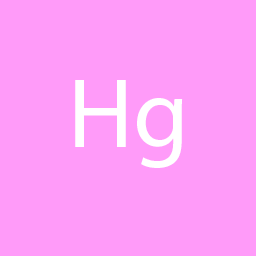
<style>
.page{position:relative;width:256px;height:256px;background:#ff9bf9}
.page>*{position:absolute;margin:0}
.t1{font:100px "MyriadPro-Regular";color:#ffffff}
</style>
<div class="page">
<p class="t1" style="left:75px;top:80px;width:108px;height:88px">Hg</p>
</div>
